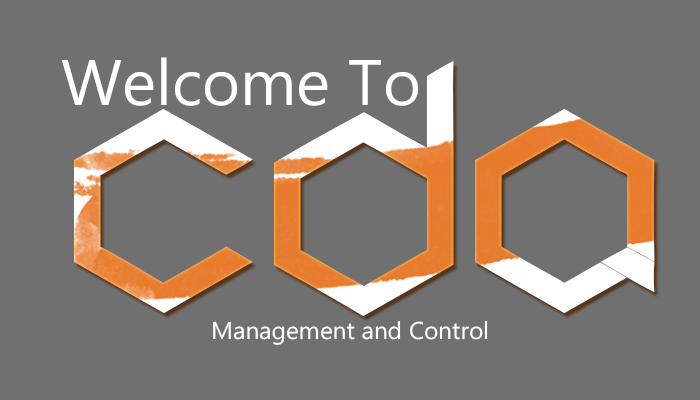
<style>
.page{position:relative;width:700px;height:400px;background:#707070}
.page>*{position:absolute;margin:0}
.t1{font:64.3px "Ebrima";color:#ffffff}
.t2{font:241.3px "Cubic"}
.t3{font:24.1px "Ebrima";color:#ffffff}
</style>
<div class="page">
<p class="t1" style="left:61px;top:57px;width:357px;height:49px">Welcome To</p>
<p class="t2" style="left:74px;top:61px;width:581px;height:255px">CDA</p>
<p class="t3" style="left:213px;top:320px;width:275px;height:25px">Management and Control</p>
</div>
